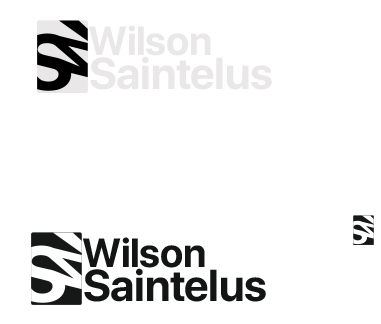
<style>
.page{position:relative;width:381px;height:324px;background:#ffffff}
.page>*{position:absolute;margin:0}
.t1{font:40.5px "SFProDisplay-Bold";color:#e9e7e7}
.t2{font:44.2px "SFProDisplay-Bold";color:#e9e7e7}
.t3{font:40.5px "SFProDisplay-Bold";color:#131414}
.t4{font:44.2px "SFProDisplay-Bold";color:#131414}
</style>
<div class="page">
<p class="t1" style="left:88px;top:25px;width:123px;height:31px">Wilson</p>
<p class="t2" style="left:90px;top:56px;width:182px;height:34px">Saintelus</p>
<p class="t3" style="left:82px;top:237px;width:123px;height:31px">Wilson</p>
<p class="t4" style="left:84px;top:268px;width:182px;height:34px">Saintelus</p>
</div>
